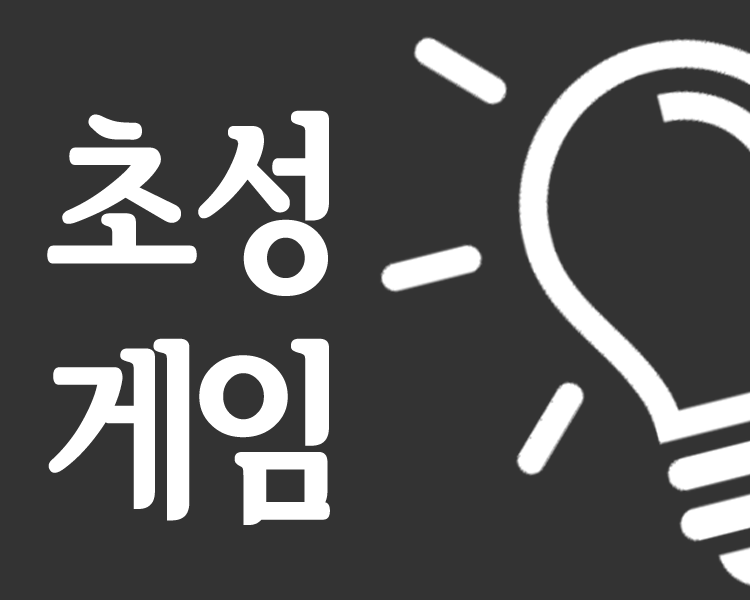
<style>
.page{position:relative;width:750px;height:600px;background:#333333}
.page>*{position:absolute;margin:0}
.t1{font:190px "SeoulHangangCBL";color:#ffffff}
</style>
<div class="page">
<p class="t1" style="left:47px;top:110px;width:283px;height:415px;text-align:right">초성<br>게임</p>
</div>
